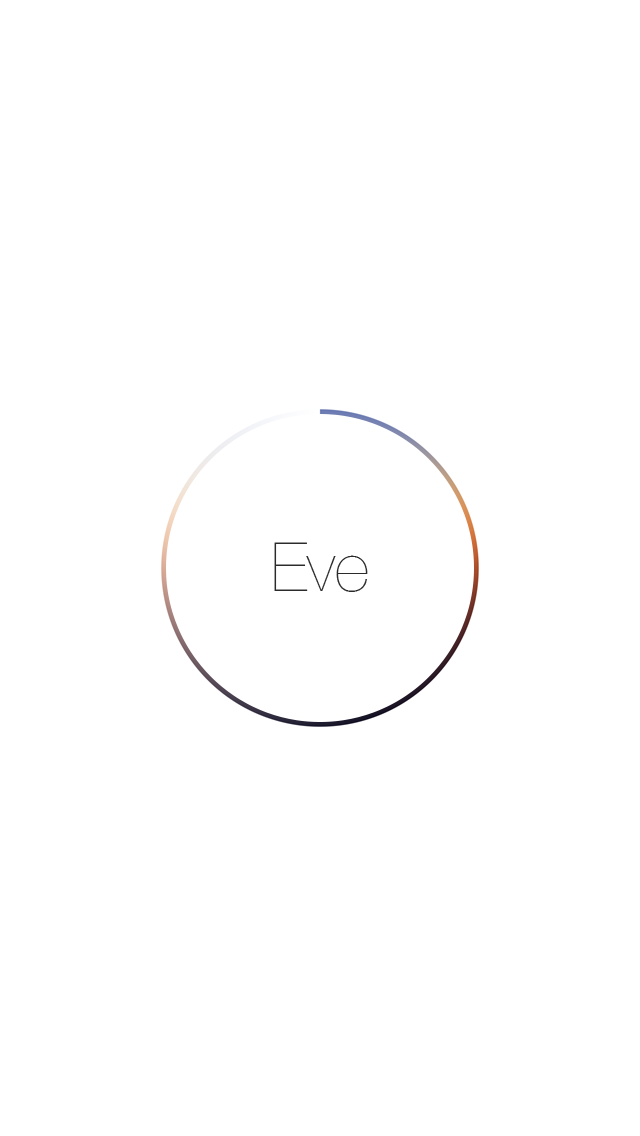
<style>
.page{position:relative;width:640px;height:1136px;background:#ffffff}
.page>*{position:absolute;margin:0}
.t1{font:67.9px "HelveticaNeue-UltraLight";color:#2b2b2b}
</style>
<div class="page">
<p class="t1" style="left:274px;top:542px;width:94px;height:50px">Eve</p>
</div>
